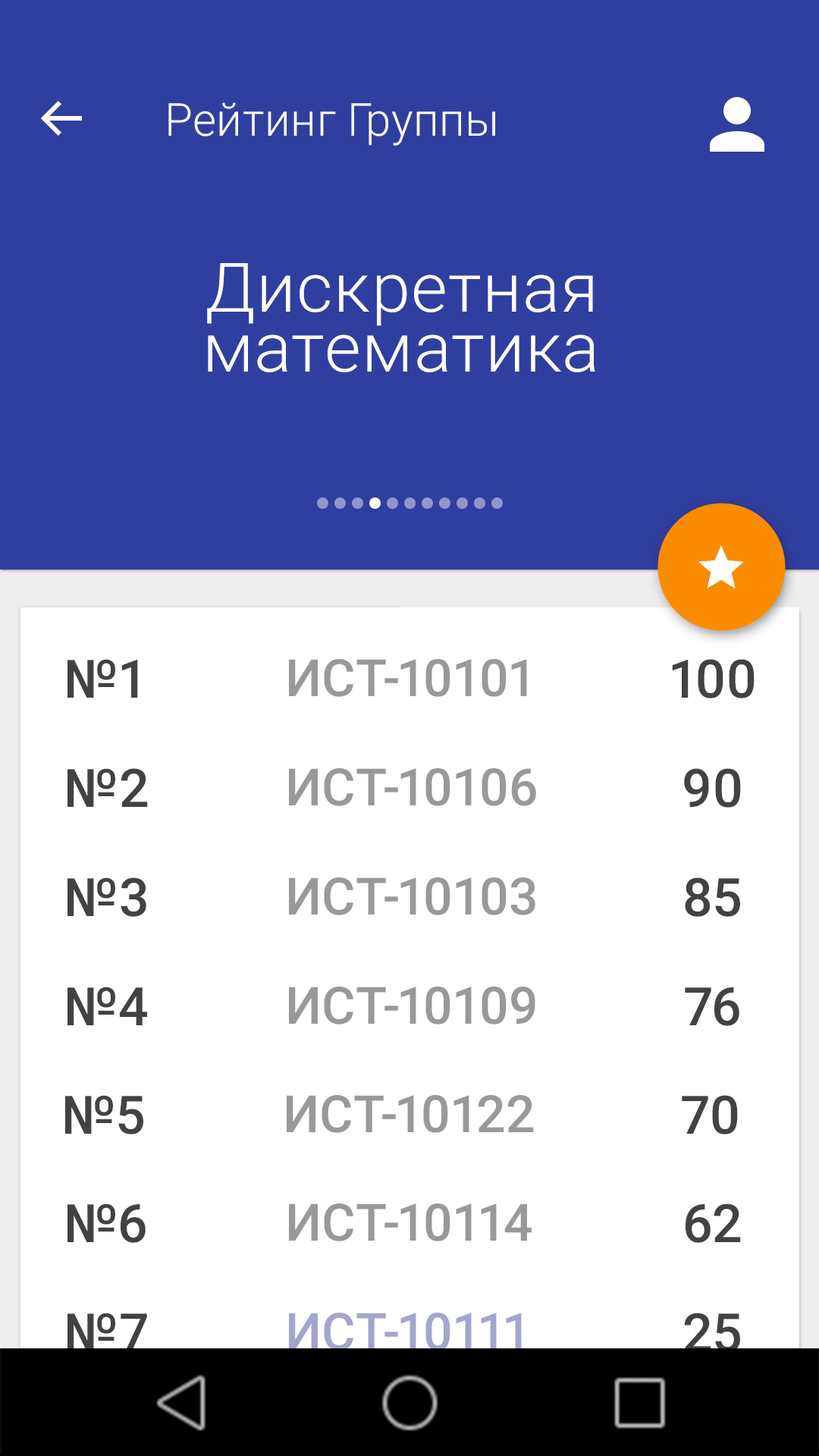
<style>
.page{position:relative;width:819px;height:1456px;background:#ffffff}
.page>*{position:absolute;margin:0}
.t1{font:45.5px "Roboto-Light";letter-spacing:0.005em;color:#ffffff}
.t2{font:68.3px/60.1px "Roboto-Light";letter-spacing:0.01em;color:#ffffff}
.t3{font:53.1px "Roboto-Medium";letter-spacing:0.01em;color:#424242}
.t4{font:51.6px "Roboto-Medium";letter-spacing:0.01em;color:#999999}
.t5{font:51.6px "Roboto-Medium";letter-spacing:0.01em;color:#a2a6ce}
</style>
<div class="page">
<p class="t1" style="left:168px;top:102px;width:327px;height:44px">Рейтинг Группы</p>
<p class="t2" style="left:207px;top:263px;width:388px;height:109px;text-align:center">Дискретная <br>математика</p>
<p class="t3" style="left:67px;top:659px;width:71px;height:39px">№1</p>
<p class="t4" style="left:289px;top:659px;width:238px;height:38px">ИСТ-10101</p>
<p class="t3" style="left:672px;top:659px;width:83px;height:39px">100</p>
<p class="t3" style="left:67px;top:768px;width:81px;height:39px">№2</p>
<p class="t4" style="left:289px;top:768px;width:247px;height:38px">ИСТ-10106</p>
<p class="t3" style="left:684px;top:768px;width:57px;height:40px">90</p>
<p class="t3" style="left:67px;top:877px;width:79px;height:40px">№3</p>
<p class="t4" style="left:289px;top:877px;width:246px;height:38px">ИСТ-10103</p>
<p class="t3" style="left:685px;top:877px;width:55px;height:40px">85</p>
<p class="t3" style="left:67px;top:987px;width:80px;height:38px">№4</p>
<p class="t4" style="left:289px;top:987px;width:246px;height:37px">ИСТ-10109</p>
<p class="t3" style="left:685px;top:987px;width:54px;height:39px">76</p>
<p class="t3" style="left:65px;top:1095px;width:78px;height:39px">№5</p>
<p class="t4" style="left:287px;top:1095px;width:247px;height:38px">ИСТ-10122</p>
<p class="t3" style="left:682px;top:1095px;width:56px;height:39px">70</p>
<p class="t3" style="left:67px;top:1203px;width:79px;height:40px">№6</p>
<p class="t4" style="left:289px;top:1203px;width:243px;height:38px">ИСТ-10114</p>
<p class="t3" style="left:686px;top:1203px;width:55px;height:40px">62</p>
<p class="t3" style="left:67px;top:1313px;width:80px;height:38px">№7</p>
<p class="t5" style="left:289px;top:1313px;width:233px;height:38px">ИСТ-10111</p>
<p class="t3" style="left:684px;top:1313px;width:56px;height:39px">25</p>
</div>
